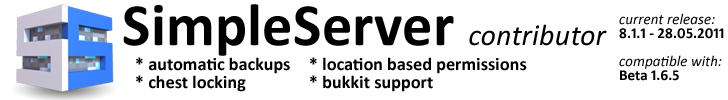
<style>
.page{position:relative;width:728px;height:100px;background:#ffffff}
.page>*{position:absolute;margin:0}
.t1{font:60px "Calibri-Bold";letter-spacing:0.005em;color:#000000}
.t2{font:30px "Calibri-Italic";letter-spacing:0.005em;color:#000000}
.t3{font:15px/14px "Calibri-Bold";letter-spacing:0.005em;color:#000000}
.t4{font:15px/14px "Calibri-Italic";letter-spacing:0.005em;color:#000000}
.t5{font:18px/18.5px "Calibri-Bold";letter-spacing:0.005em;color:#000000}
</style>
<div class="page">
<p class="t1" style="left:123px;top:4px;width:484px;height:52px">SimpleServer <span class="t2">contributor</span></p>
<p class="t3" style="left:619px;top:13px;width:105px;height:68px"><span class="t4">current release:<br></span>8.1.1 - 28.05.2011<br><br><span class="t4">compatible with:<br></span>Beta 1.6.5</p>
<p class="t5" style="left:136px;top:57px;width:154px;height:35px">* automatic backups<br>* chest locking</p>
<p class="t5" style="left:310px;top:57px;width:217px;height:35px">* location based permissions<br>* bukkit support</p>
</div>
